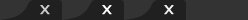
<style>
.page{position:relative;width:248px;height:20px;background:#333333}
.page>*{position:absolute;margin:0}
.t1{font:12px "Verdana";color:#cccccc;font-weight:bold;scale:1.2 1}
.t2{font:12px "Verdana";color:#ffffff;font-weight:bold;scale:1.2 1}
.t3{font:12px "Verdana";color:#f2f1f1;font-weight:bold;scale:1.2 1}
</style>
<div class="page">
<p class="t1" style="left:40px;top:5px;width:10px;height:10px">X</p>
<p class="t2" style="left:102px;top:5px;width:10px;height:10px">X</p>
<p class="t3" style="left:164px;top:5px;width:10px;height:10px">X</p>
</div>
